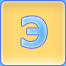
<style>
.page{position:relative;width:66px;height:66px}
.page>*{position:absolute;margin:0}
.t1{font:41px "Tahoma-Bold"}
</style>
<div class="page">
<p class="t1" style="left:21px;top:16px;width:26px;height:32px">Э</p>
<p class="t1" style="left:21px;top:16px;width:26px;height:32px">Э</p>
</div>
